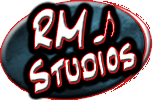
<style>
.page{position:relative;width:153px;height:100px;background:#ffffff}
.page>*{position:absolute;margin:0}
.t1{font:47.3px "JazzText";color:#ffffff;font-style:italic}
.t2{font:32px "Maestro";font-style:italic}
.t3{font:37.8px "JazzText";font-style:italic}
</style>
<div class="page">
<p class="t1" style="left:33px;top:9px;width:54px;height:40px">RM</p>
<p class="t2" style="left:94px;top:11px;width:20px;height:33px">e</p>
<p class="t3" style="left:30px;top:43px;width:106px;height:50px;rotate:-14deg">Studios</p>
</div>
